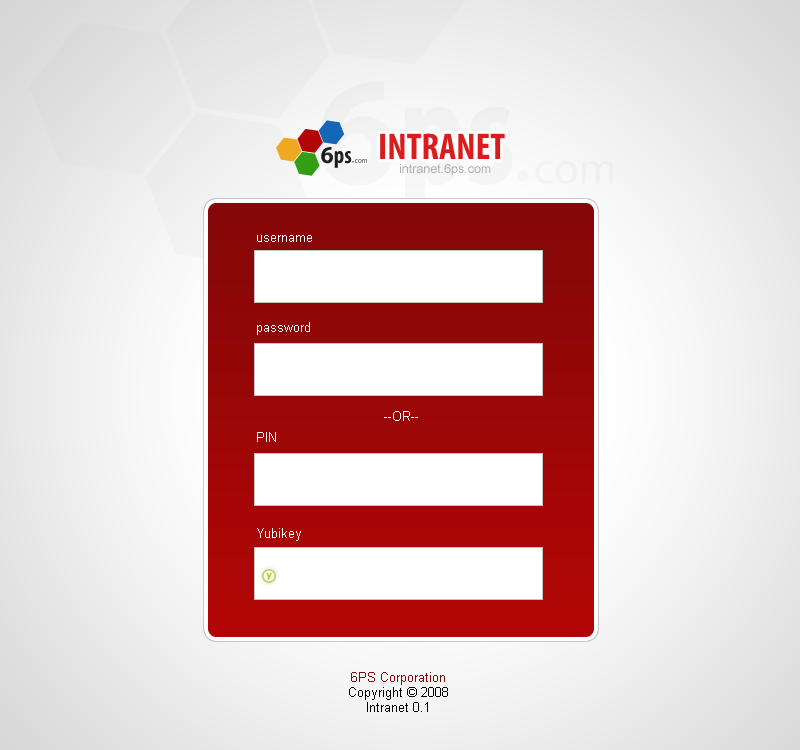
<style>
.page{position:relative;width:800px;height:750px}
.page>*{position:absolute;margin:0}
.t1{font:12.5px "ArialMT";color:#adadad}
.t2{font:12.5px "ArialMT";color:#ffffff}
.t3{font:12.5px "ArialMT";color:#000000}
.t4{font:12.5px "ArialMT";color:#860707}
</style>
<div class="page">
<p class="t1" style="left:400px;top:164px;width:91px;height:12px">intranet.6ps.com</p>
<p class="t2" style="left:257px;top:235px;width:55px;height:7px">username</p>
<p class="t2" style="left:257px;top:322px;width:53px;height:13px">password</p>
<p class="t2" style="left:384px;top:411px;width:34px;height:10px">--OR--</p>
<p class="t2" style="left:257px;top:432px;width:19px;height:10px">PIN</p>
<p class="t2" style="left:257px;top:528px;width:44px;height:13px">Yubikey</p>
<p class="t3" style="left:349px;top:672px;width:99px;height:40px;text-align:center"><span class="t4">6PS Corporation<br></span>Copyright © 2008<br>Intranet 0.1</p>
</div>
